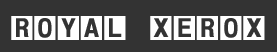
<style>
.page{position:relative;width:277px;height:52px;background:#333333}
.page>*{position:absolute;margin:0}
.t1{font:28.7px "HeaveneticaBoxedBoldSH";letter-spacing:-0.025em;color:#ffffff}
</style>
<div class="page">
<p class="t1" style="left:11px;top:16px;width:254px;height:24px">ROYAL XEROX</p>
</div>
